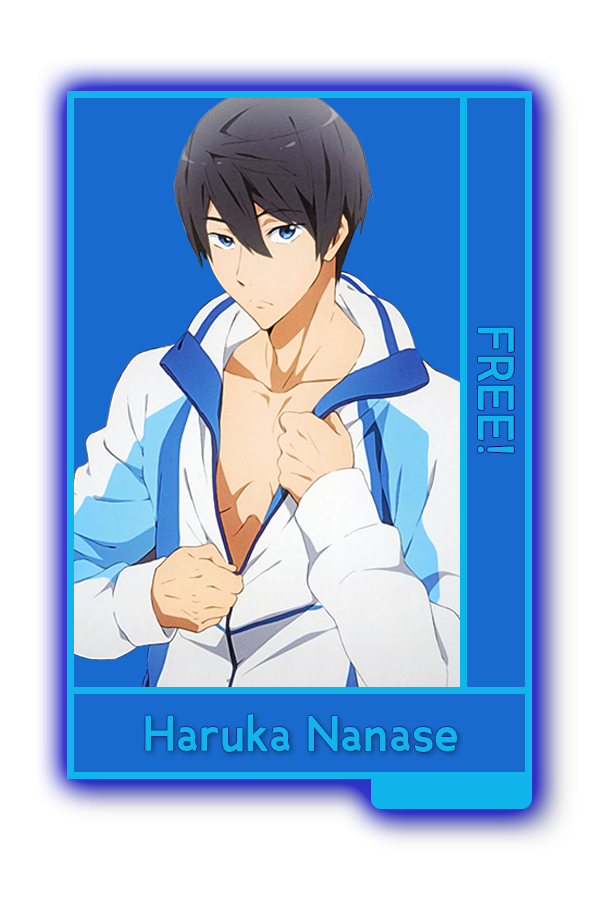
<style>
.page{position:relative;width:600px;height:900px;background:#ffffff}
.page>*{position:absolute;margin:0}
.t1{font:47.8px "Ancillary-Bold";color:#0fb5eb}
.t2{font:46.7px "Ancillary-Bold";color:#0fb5eb}
</style>
<div class="page">
<p class="t1" style="left:477px;top:327px;width:37px;height:126px;rotate:90deg">FREE!</p>
<p class="t2" style="left:145px;top:713px;width:312px;height:39px">Haruka Nanase</p>
</div>
